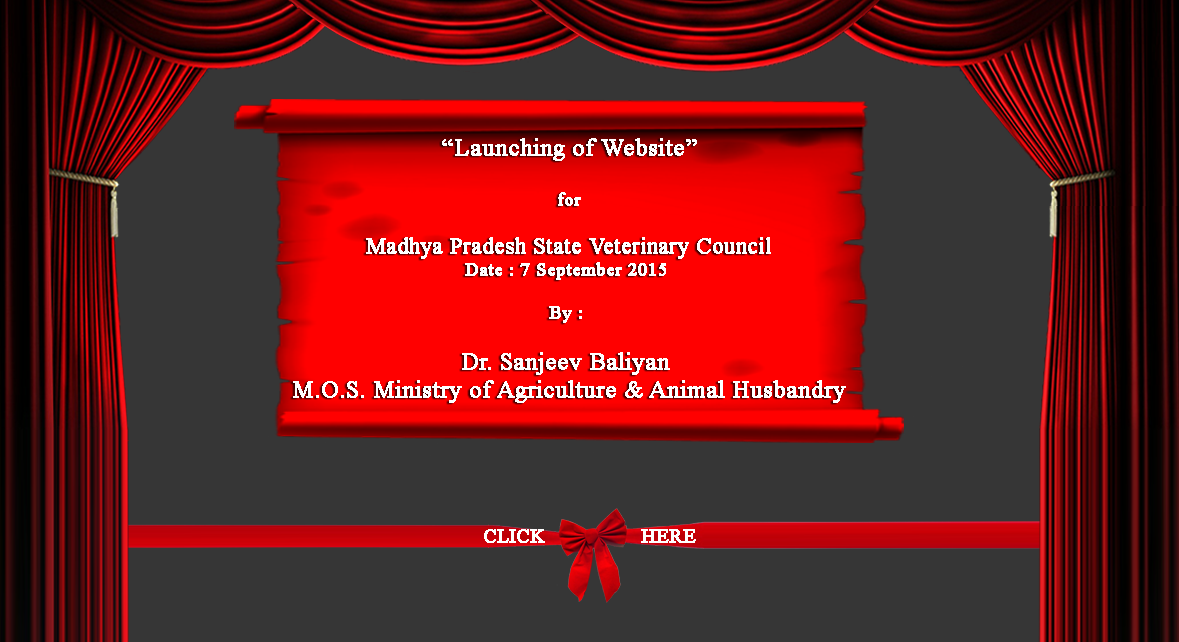
<style>
.page{position:relative;width:1179px;height:642px;background:#363636}
.page>*{position:absolute;margin:0}
.t1{font:24px "TimesNewRomanPSMT";color:#ffffff;font-weight:bold}
.t2{font:18px "TimesNewRomanPSMT";color:#ffffff;font-weight:bold}
.t3{font:22px "TimesNewRomanPSMT";color:#ffffff;font-weight:bold}
.t4{font:20px "TimesNewRomanPSMT";color:#ffffff;font-weight:bold}
</style>
<div class="page">
<p class="t1" style="left:293px;top:138px;width:553px;height:265px;text-align:center">“Launching of Website”<br><br><span class="t2">for<br><br></span><span class="t3">Madhya Pradesh State Veterinary Council<br></span><span class="t2">Date : 7 September 2015 <br><br>By : <br><br></span>Dr. Sanjeev Baliyan <br>M.O.S. Ministry of Agriculture &amp; Animal Husbandry</p>
<p class="t4" style="left:484px;top:529px;width:212px;height:14px">CLICK                HERE</p>
</div>
